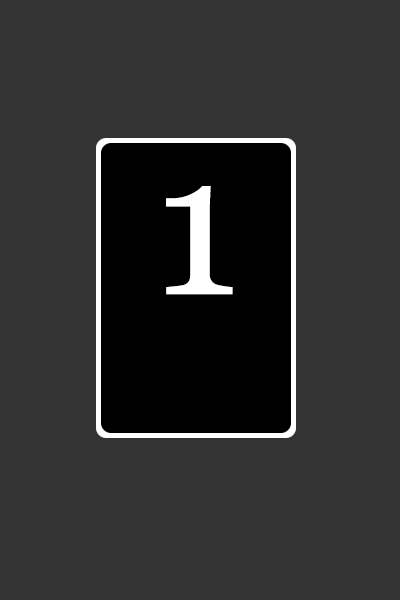
<style>
.page{position:relative;width:400px;height:600px;background:#333333}
.page>*{position:absolute;margin:0}
.t1{font:200px "Georgia";color:#ffffff}
</style>
<div class="page">
<p class="t1" style="left:166px;top:186px;width:67px;height:109px">1</p>
</div>
